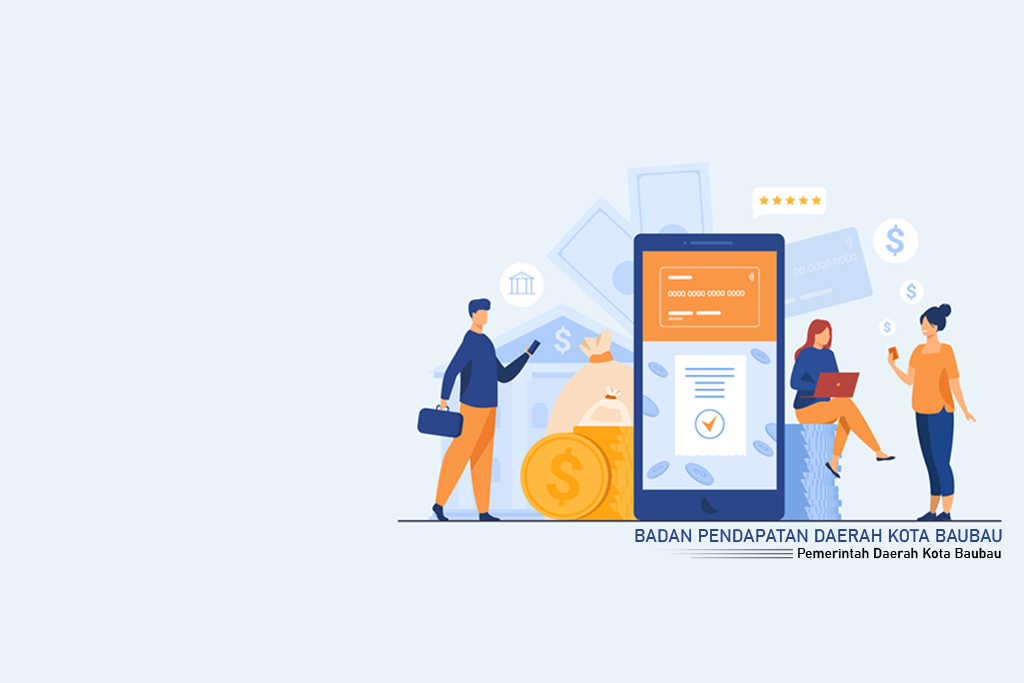
<style>
.page{position:relative;width:1024px;height:683px;background:#eaf3fa}
.page>*{position:absolute;margin:0}
.t1{font:18px "Bahnschrift";color:#2a458a}
.t2{font:14px "Bahnschrift";color:#000000}
</style>
<div class="page">
<p class="t1" style="left:635px;top:528px;width:367px;height:15px">BADAN PENDAPATAN DAERAH KOTA BAUBAU</p>
<p class="t2" style="left:798px;top:547px;width:203px;height:12px">Pemerintah Daerah Kota Baubau</p>
</div>
